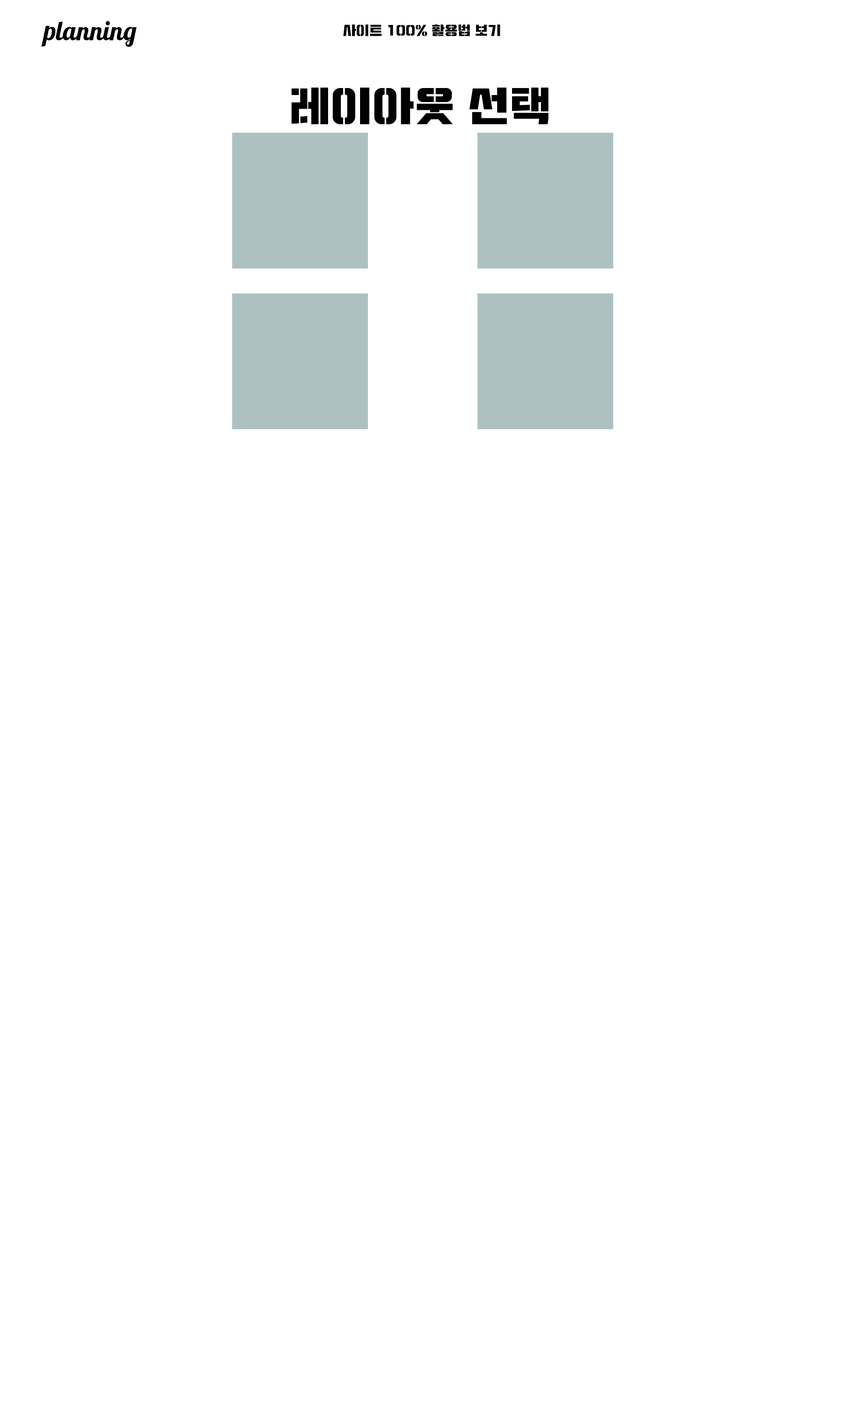
<style>
.page{position:relative;width:841px;height:1419px;background:#ffffff}
.page>*{position:absolute;margin:0}
.t1{font:26.3px "Lobster-Regular";color:#000000}
.t2{font:13.1px "Typo_SsangmunDong_St";color:#000000}
.t3{font:41.6px "Typo_SsangmunDong_St";color:#000000}
</style>
<div class="page">
<p class="t1" style="left:41px;top:21px;width:96px;height:26px">planning</p>
<p class="t2" style="left:343px;top:24px;width:157px;height:12px">사이트 100% 활용법 보기</p>
<p class="t3" style="left:291px;top:88px;width:257px;height:36px">레이아웃 선택</p>
</div>
